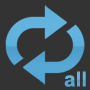
<style>
.page{position:relative;width:90px;height:90px;background:#333333}
.page>*{position:absolute;margin:0}
.t1{font:20.8px "Arial-BoldMT";color:#57a9d4}
</style>
<div class="page">
<p class="t1" style="left:64px;top:71px;width:22px;height:16px">all</p>
</div>
